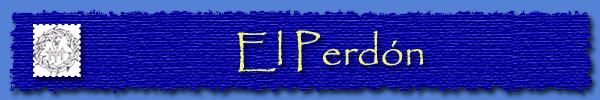
<style>
.page{position:relative;width:600px;height:100px}
.page>*{position:absolute;margin:0}
.t1{font:42px "Papyrus-Regular";color:#ecf287}
</style>
<div class="page">
<p class="t1" style="left:237px;top:30px;width:187px;height:42px">El Perdón</p>
</div>
